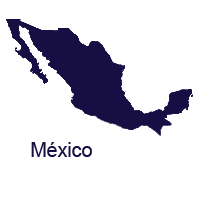
<style>
.page{position:relative;width:200px;height:200px;background:#ffffff}
.page>*{position:absolute;margin:0}
.t1{font:20.8px "ArialMT";color:#170f44;scale:0.94 1}
</style>
<div class="page">
<p class="t1" style="left:31px;top:142px;width:61px;height:15px">México</p>
</div>
